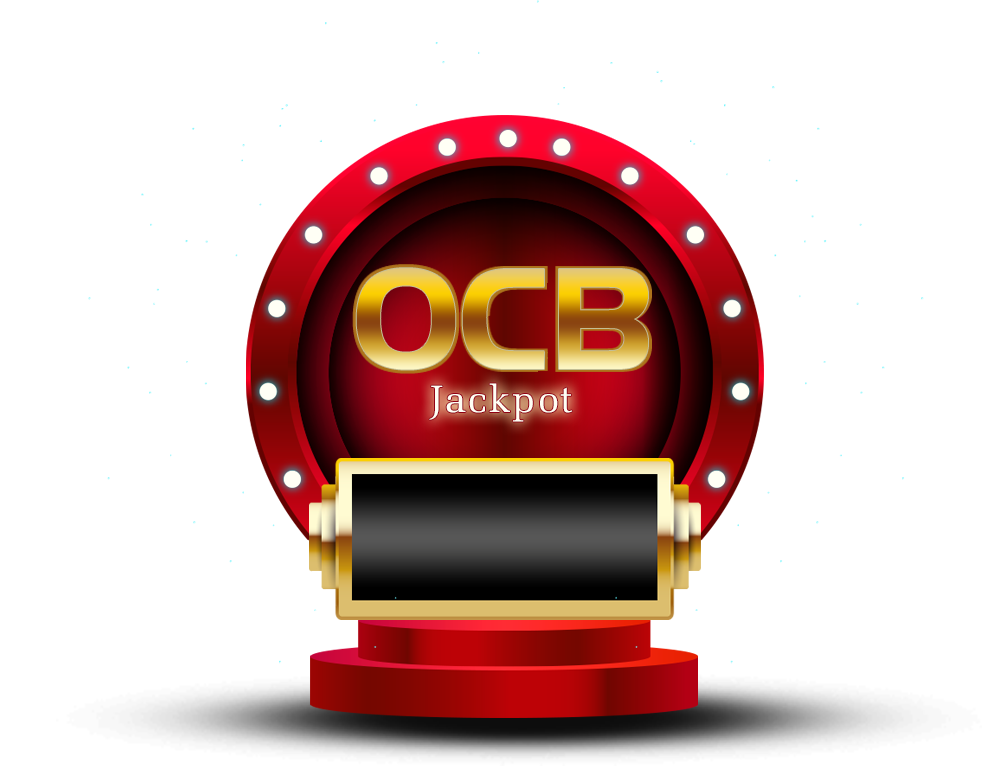
<style>
.page{position:relative;width:1000px;height:771px;background:#ffffff}
.page>*{position:absolute;margin:0}
.t1{font:150px "VNI-HandelGothicBold"}
.t2{font:38.1px "VNI-Meli";letter-spacing:0.05em;color:#fffff5}
</style>
<div class="page">
<p class="t1" style="left:356px;top:268px;width:292px;height:102px">OCB</p>
<p class="t2" style="left:429px;top:383px;width:144px;height:39px">Jackpot</p>
</div>
